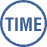
<style>
.page{position:relative;width:47px;height:47px;background:#ffffff}
.page>*{position:absolute;margin:0}
.t1{font:17.9px "HelveticaLTStd-BoldCond";color:#3b5f97}
</style>
<div class="page">
<p class="t1" style="left:5px;top:17px;width:37px;height:14px">TIME</p>
</div>
